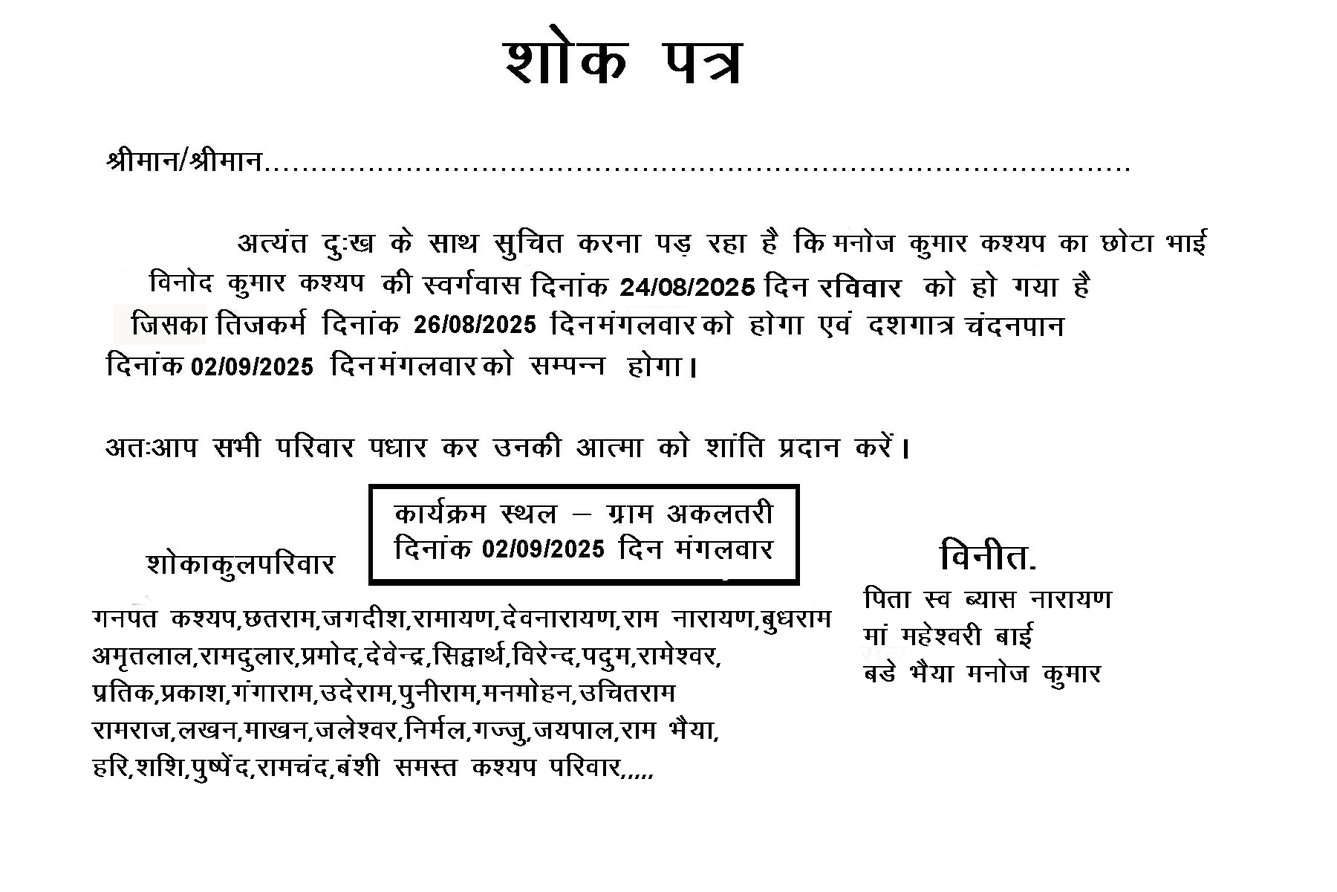
<style>
.page{position:relative;width:1337px;height:892px;background:#ffffff}
.page>*{position:absolute;margin:0}
.t1{font:31px "KrutiDev011";color:#070707}
.t2{font:32.9px "KrutiDev011";color:#040404;scale:1.05 1}
.t3{font:24.8px "Arial-BoldMT";color:#070707;scale:1.1 1}
.t4{font:33.7px "KrutiDev011";color:#070707;scale:0.89 1}
.t5{font:24.8px "Arial-BoldMT";color:#070707}
.t6{font:34.1px "KrutiDev011";color:#070707}
.t7{font:33.1px "KrutiDev011";color:#030303}
.t8{font:31px "KrutiDev011";color:#030303}
</style>
<div class="page">
<p class="t1" style="left:833px;top:228px;width:375px;height:31px">eukst dqekj d’;i dk NksVk HkkbZ</p>
<p class="t1" style="left:149px;top:267px;width:216px;height:32px">fouksn dqekj d';i</p>
<p class="t2" style="left:422px;top:269px;width:100px;height:25px">LoxZokl</p>
<p class="t3" style="left:620px;top:278px;width:135px;height:18px">24/08/2025</p>
<p class="t4" style="left:131px;top:309px;width:77px;height:25px">ftldk</p>
<p class="t5" style="left:415px;top:314px;width:121px;height:19px">26/08/2025</p>
<p class="t6" style="left:597px;top:311px;width:100px;height:23px">eaxyokj</p>
<p class="t6" style="left:378px;top:351px;width:100px;height:24px">eaxyokj</p>
<p class="t5" style="left:192px;top:357px;width:121px;height:18px">02/09/2025</p>
<p class="t7" style="left:529px;top:357px;width:77px;height:17px">lEiUu</p>
<p class="t5" style="left:483px;top:539px;width:121px;height:18px">02/09/2025</p>
<p class="t6" style="left:675px;top:535px;width:99px;height:24px">eaxyokj</p>
<p class="t8" style="left:863px;top:585px;width:250px;height:105px">firk Lo C;kl ukjk;.k<br>eka egs’ojh ckbZ<br>cMs HkS;k <span class="t1">eukst dqekj</span></p>
<p class="t8" style="left:91px;top:603px;width:741px;height:180px"><span class="t1">xuir d’;i</span>]Nrjke]txnh'k]jkek;.k]nsoukjk;.k]jke ukjk;.k]cq/kjke <br>ve`ryky]jkenqykj]çeksn]nsosUnz]fl}kFkZ]fojsUn]inqe]jkes'oj]<br>izfrd]çdk'k]xaxkjke]mnsjke]iquhjke]eueksgu]mfprjke<br>jkejkt]y[ku]ek[ku]tys'oj]fueZy]xTtq]t;iky]jke‌HkS;k] <br>gfj]’kf’k]iq"isan]jkepan]ca'kh leLr d’;i ifjokj]]]]]</p>
</div>
